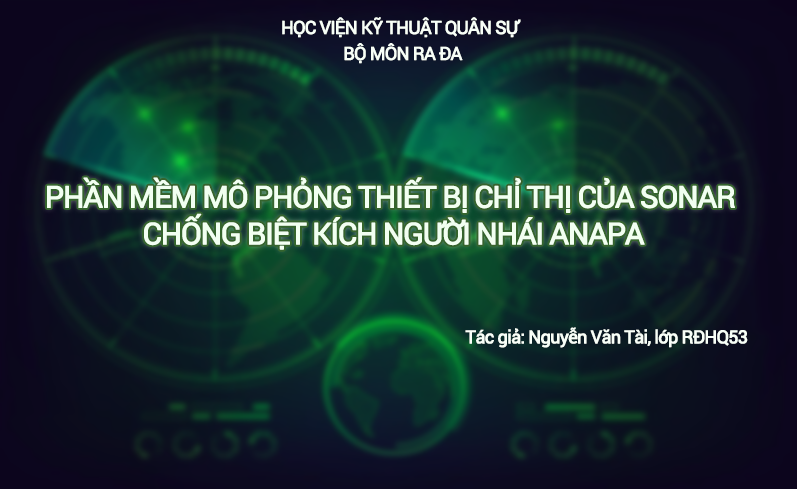
<style>
.page{position:relative;width:797px;height:489px}
.page>*{position:absolute;margin:0}
.t1{font:18px "Roboto-Regular";letter-spacing:-0.06em;color:#f8fff8;font-weight:bold}
.t2{font:30px/6.1px "Roboto-Regular";letter-spacing:-0.06em;color:#eeffed;font-weight:bold}
</style>
<div class="page">
<p class="t1" style="left:282px;top:17px;width:239px;height:21px">HỌC VIỆN KỸ THUẬT QUÂN SỰ</p>
<p class="t1" style="left:344px;top:43px;width:119px;height:21px">BỘ MÔN RA ĐA</p>
<p class="t2" style="left:47px;top:177px;width:688px;height:73px;text-align:center">PHẦN MỀM MÔ PHỎNG THIẾT BỊ CHỈ THỊ CỦA SONAR <br><br><br><br><br><br>CHỐNG BIỆT KÍCH NGƯỜI NHÁI ANAPA</p>
<p class="t1" style="left:465px;top:327px;width:283px;height:21px">Tác giả: Nguyễn Văn Tài, lớp RĐHQ53</p>
</div>
